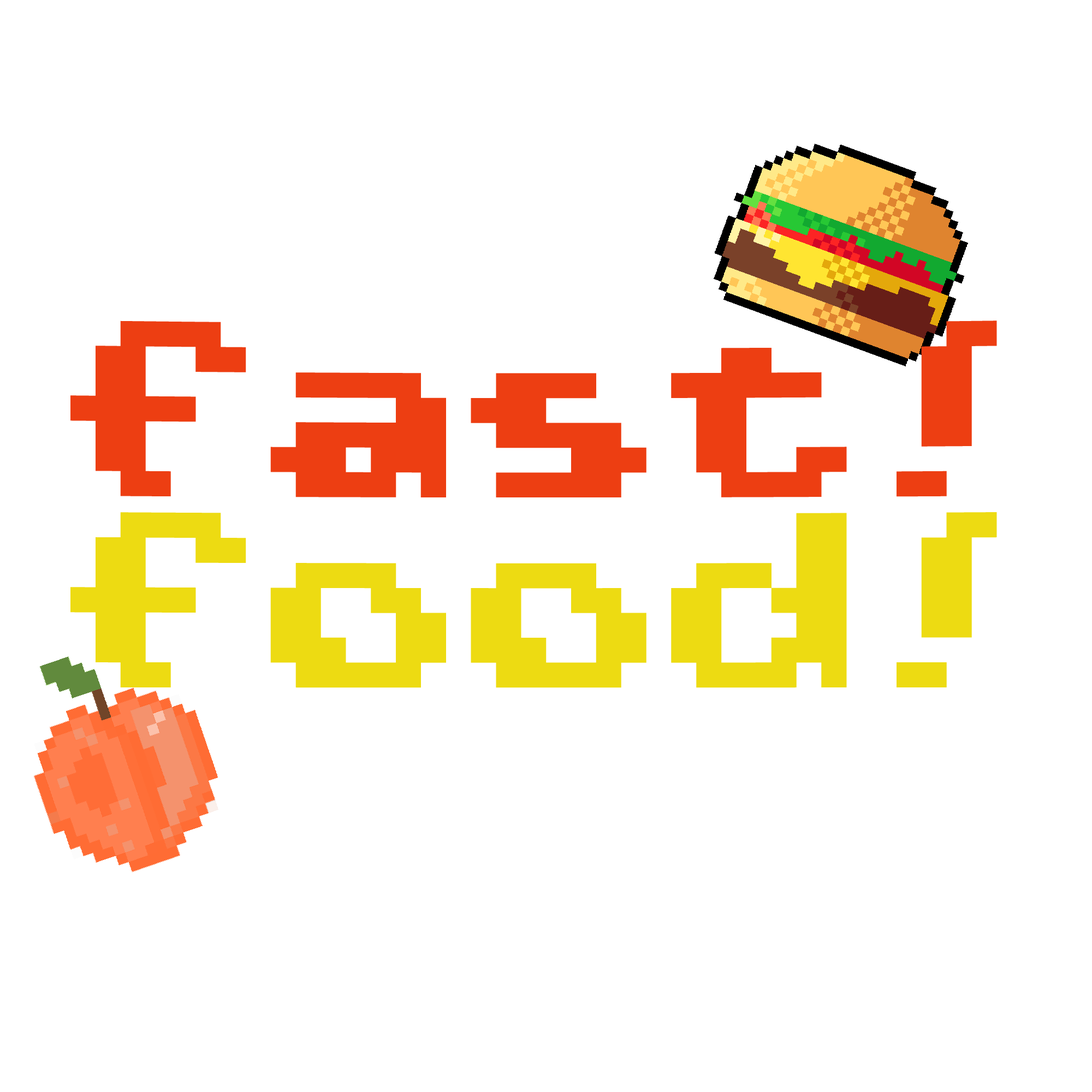
<style>
.page{position:relative;width:1092px;height:1092px;background:#ffffff}
.page>*{position:absolute;margin:0}
.t1{font:175.2px/191.6px "Wayfarer's-Toy-Box";color:#ed3e12}
.t2{font:175.2px/191.6px "Wayfarer's-Toy-Box";color:#eddb12}
</style>
<div class="page">
<p class="t1" style="left:70px;top:320px;width:927px;height:368px">Fast!<br><span class="t2">Food!</span></p>
</div>
